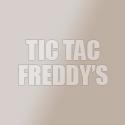
<style>
.page{position:relative;width:125px;height:125px;background:#d6cfcb}
.page>*{position:absolute;margin:0}
.t1{font:25px/25px "Impact";color:#ffffff}
</style>
<div class="page">
<p class="t1" style="left:19px;top:40px;width:89px;height:45px;text-align:center;opacity:0.38">TIC TAC<br>FREDDY’S</p>
</div>
